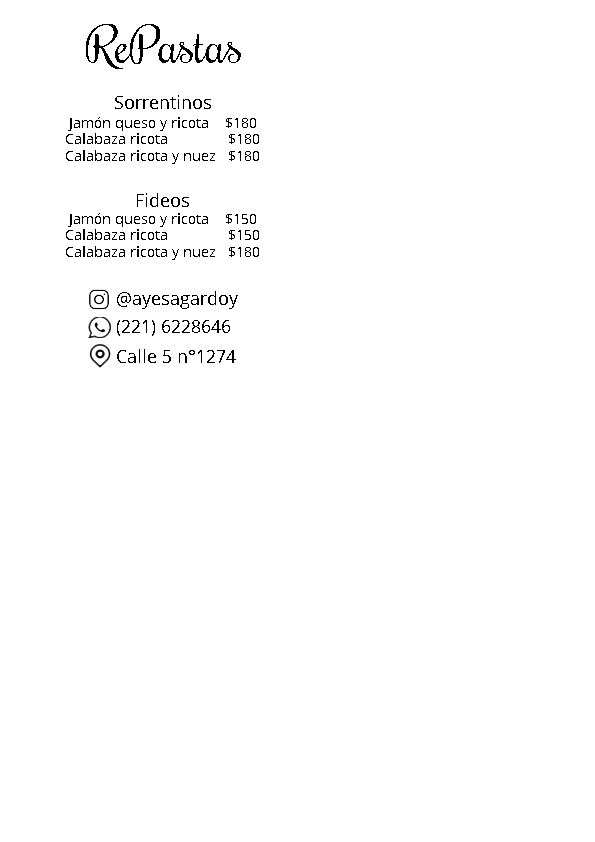
<style>
.page{position:relative;width:595px;height:842px;background:#ffffff}
.page>*{position:absolute;margin:0}
.t1{font:48px "Rochester-Regular";color:#000000}
.t2{font:18px "OpenSans";color:#000000}
.t3{font:14px "OpenSans";color:#000000}
</style>
<div class="page">
<p class="t1" style="left:86px;top:24px;width:155px;height:45px">RePastas</p>
<p class="t2" style="left:115px;top:95px;width:96px;height:14px">Sorrentinos</p>
<p class="t3" style="left:66px;top:117px;width:193px;height:47px">Jamón queso y ricota    $180 <br>Calabaza ricota               $180<br>Calabaza ricota y nuez   $180</p>
<p class="t2" style="left:137px;top:193px;width:52px;height:14px">Fideos</p>
<p class="t3" style="left:66px;top:213px;width:193px;height:47px">Jamón queso y ricota    $150 <br>Calabaza ricota               $150<br>Calabaza ricota y nuez   $180</p>
<p class="t2" style="left:117px;top:291px;width:121px;height:18px">@ayesagardoy</p>
<p class="t2" style="left:117px;top:320px;width:113px;height:16px">(221) 6228646</p>
<p class="t2" style="left:117px;top:349px;width:119px;height:14px">Calle 5 n°1274</p>
</div>
